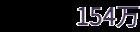
<style>
.page{position:relative;width:140px;height:32px;background:#000000}
.page>*{position:absolute;margin:0}
.t1{font:24px "WebPSD-18463539-0-Regular";color:#3f3254;font-weight:bold}
</style>
<div class="page">
<p class="t1" style="left:0px;top:0px;width:140px;height:32px">154万</p>
</div>
